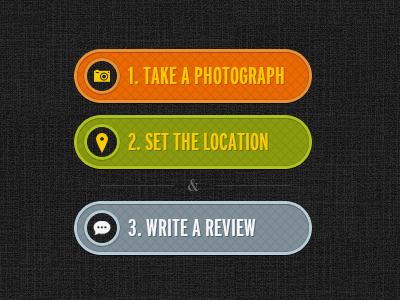
<style>
.page{position:relative;width:400px;height:300px}
.page>*{position:absolute;margin:0}
.t1{font:24px "Interstate-BoldCompressed";color:#f8ca00}
.t2{font:16px "DidotLTStd-Roman";color:#676e6e}
.t3{font:24px "Interstate-BoldCompressed";color:#f5f5f5}
</style>
<div class="page">
<p class="t1" style="left:128px;top:67px;width:156px;height:18px">1. TAKE A PHOTOGRAPH</p>
<p class="t1" style="left:128px;top:133px;width:140px;height:18px">2. SET THE LOCATION</p>
<p class="t2" style="left:188px;top:179px;width:11px;height:12px">&amp;</p>
<p class="t3" style="left:128px;top:219px;width:128px;height:17px">3. WRITE A REVIEW</p>
</div>
